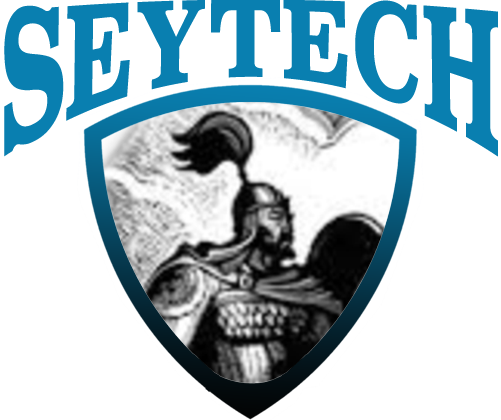
<style>
.page{position:relative;width:501px;height:420px;background:#ffffff}
.page>*{position:absolute;margin:0}
.t1{font:47.5px "Superclarendon-Bold";color:#097fb0;scale:0.44 1}
</style>
<div class="page">
<p class="t1" style="left:4px;top:0px;width:494px;height:157px">SEYTECH</p>
</div>
